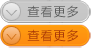
<style>
.page{position:relative;width:92px;height:48px}
.page>*{position:absolute;margin:0}
.t1{font:12px "MicrosoftYaHei";letter-spacing:0.1em;color:#5d5e5e}
.t2{font:14.3px "MicrosoftYaHeiLight";color:#a0a1a1;scale:1.89 1}
.t3{font:12px "MicrosoftYaHei";letter-spacing:0.1em;color:#ad3a07}
.t4{font:14.3px "MicrosoftYaHeiLight";color:#d37415;scale:1.69 1}
</style>
<div class="page">
<p class="t1" style="left:27px;top:5px;width:51px;height:13px">查看更多</p>
<p class="t2" style="left:5px;top:10px;width:13px;height:6px">^</p>
<p class="t3" style="left:27px;top:29px;width:51px;height:13px">查看更多</p>
<p class="t4" style="left:6px;top:34px;width:11px;height:6px">^</p>
</div>
